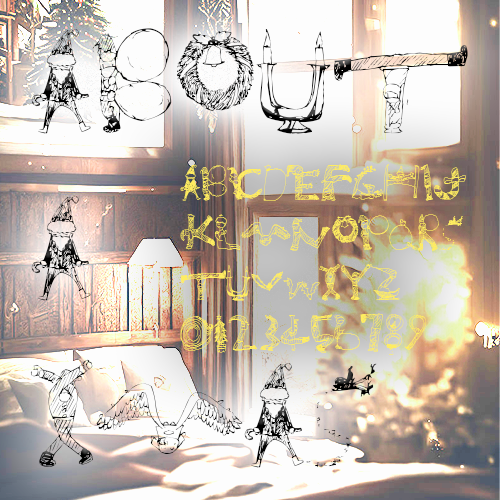
<style>
.page{position:relative;width:500px;height:500px}
.page>*{position:absolute;margin:0}
.t1{font:125px/166.7px "about-a-Xmas";color:#050505}
.t2{font:41.7px/50px "about-a-Xmas";color:#ffed60}
</style>
<div class="page">
<p class="t1" style="left:30px;top:28px;width:438px;height:440px">about<br>a<br>Xmas</p>
<p class="t2" style="left:180px;top:164px;width:286px;height:191px">abcdefghij<br>klmnopqrs<br>tuvwxyz<br>0123456789</p>
</div>
